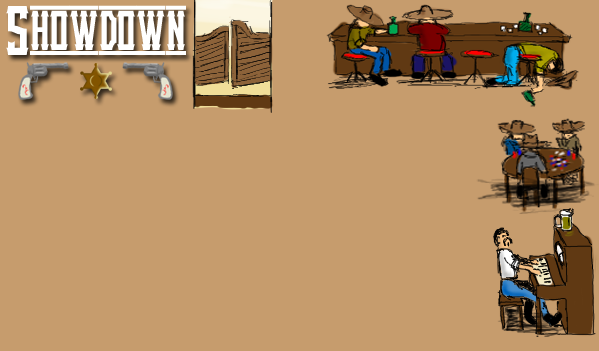
<style>
.page{position:relative;width:599px;height:351px;background:#c69c6d}
.page>*{position:absolute;margin:0}
.t1{font:76.9px "VanillaWhale";color:#ffffff;scale:0.82 1}
</style>
<div class="page">
<p class="t1" style="left:6px;top:5px;width:180px;height:50px">Showdown</p>
</div>
